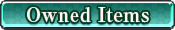
<style>
.page{position:relative;width:175px;height:30px}
.page>*{position:absolute;margin:0}
.t1{font:20px "RyuminPro-ExBold";color:#fff6f3}
</style>
<div class="page">
<p class="t1" style="left:27px;top:7px;width:122px;height:16px">Owned Items</p>
</div>
